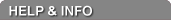
<style>
.page{position:relative;width:171px;height:20px;background:#858585}
.page>*{position:absolute;margin:0}
.t1{font:13.3px "Arial-BoldMT";color:#ffffff}
</style>
<div class="page">
<p class="t1" style="left:9px;top:5px;width:83px;height:11px">HELP &amp; INFO</p>
</div>
